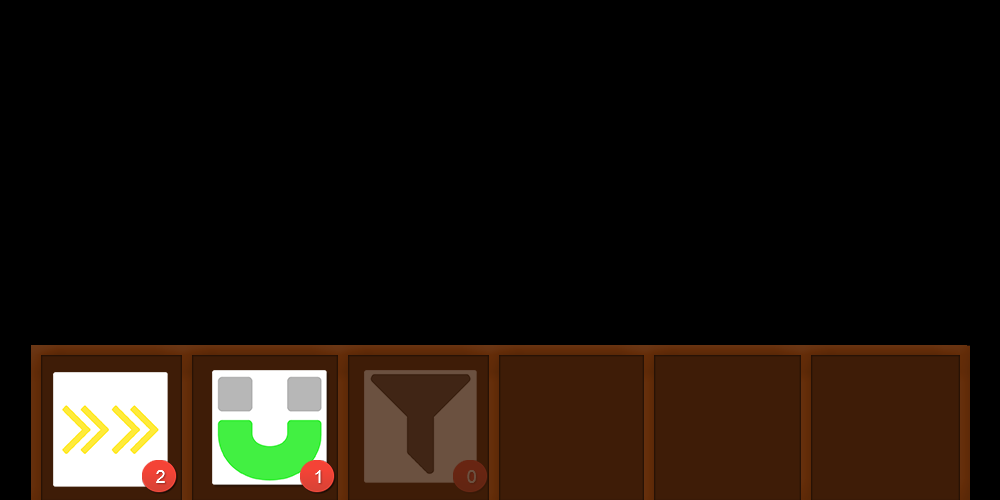
<style>
.page{position:relative;width:1000px;height:500px;background:#000000}
.page>*{position:absolute;margin:0}
.t1{font:17.7px "ArialMT";color:#ffffff}
.t2{font:17.7px "ArialMT";color:#6b5140}
</style>
<div class="page">
<p class="t1" style="left:156px;top:470px;width:9px;height:13px">2</p>
<p class="t1" style="left:315px;top:470px;width:6px;height:13px">1</p>
<p class="t2" style="left:467px;top:470px;width:9px;height:13px">0</p>
</div>
